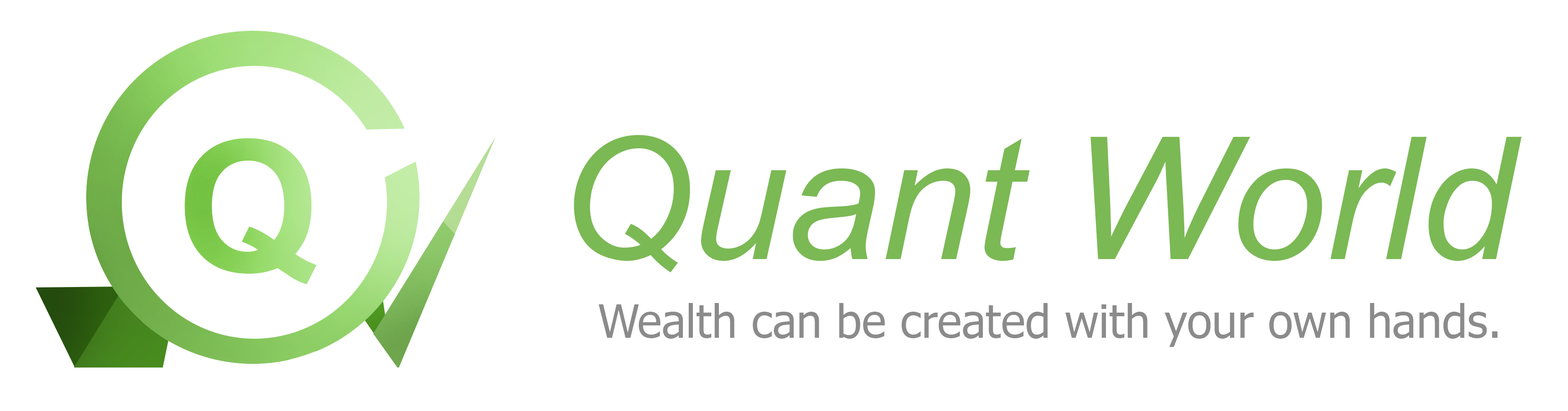
<style>
.page{position:relative;width:1568px;height:411px;background:#ffffff}
.page>*{position:absolute;margin:0}
.t1{font:170.4px "Arial-ItalicMT";color:#7bb954}
.t2{font:45.8px "Tahoma";color:#8b8b8b}
</style>
<div class="page">
<p class="t1" style="left:574px;top:135px;width:948px;height:137px">Quant World</p>
<p class="t2" style="left:599px;top:303px;width:898px;height:44px">Wealth can be created with your own hands.</p>
</div>
